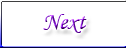
<style>
.page{position:relative;width:136px;height:48px;background:#ffffff}
.page>*{position:absolute;margin:0}
.t1{font:24px "MonotypeCorsiva"}
</style>
<div class="page">
<p class="t1" style="left:43px;top:14px;width:44px;height:19px">Next</p>
</div>
